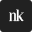
<style>
.page{position:relative;width:32px;height:32px;background:#212121}
.page>*{position:absolute;margin:0}
.t1{font:16.2px "MeticulousAriel-First";letter-spacing:-0.1em;color:#ffffff}
</style>
<div class="page">
<p class="t1" style="left:9px;top:9px;width:15px;height:13px">nk</p>
</div>
